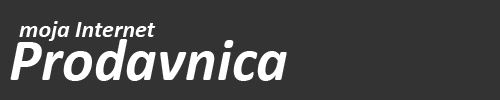
<style>
.page{position:relative;width:500px;height:100px;background:#333333}
.page>*{position:absolute;margin:0}
.t1{font:24px "Calibri-BoldItalic";color:#ffffff}
.t2{font:60px "Calibri-BoldItalic";color:#ffffff}
</style>
<div class="page">
<p class="t1" style="left:19px;top:21px;width:137px;height:20px">moja Internet</p>
<p class="t2" style="left:10px;top:39px;width:277px;height:42px">Prodavnica</p>
</div>
